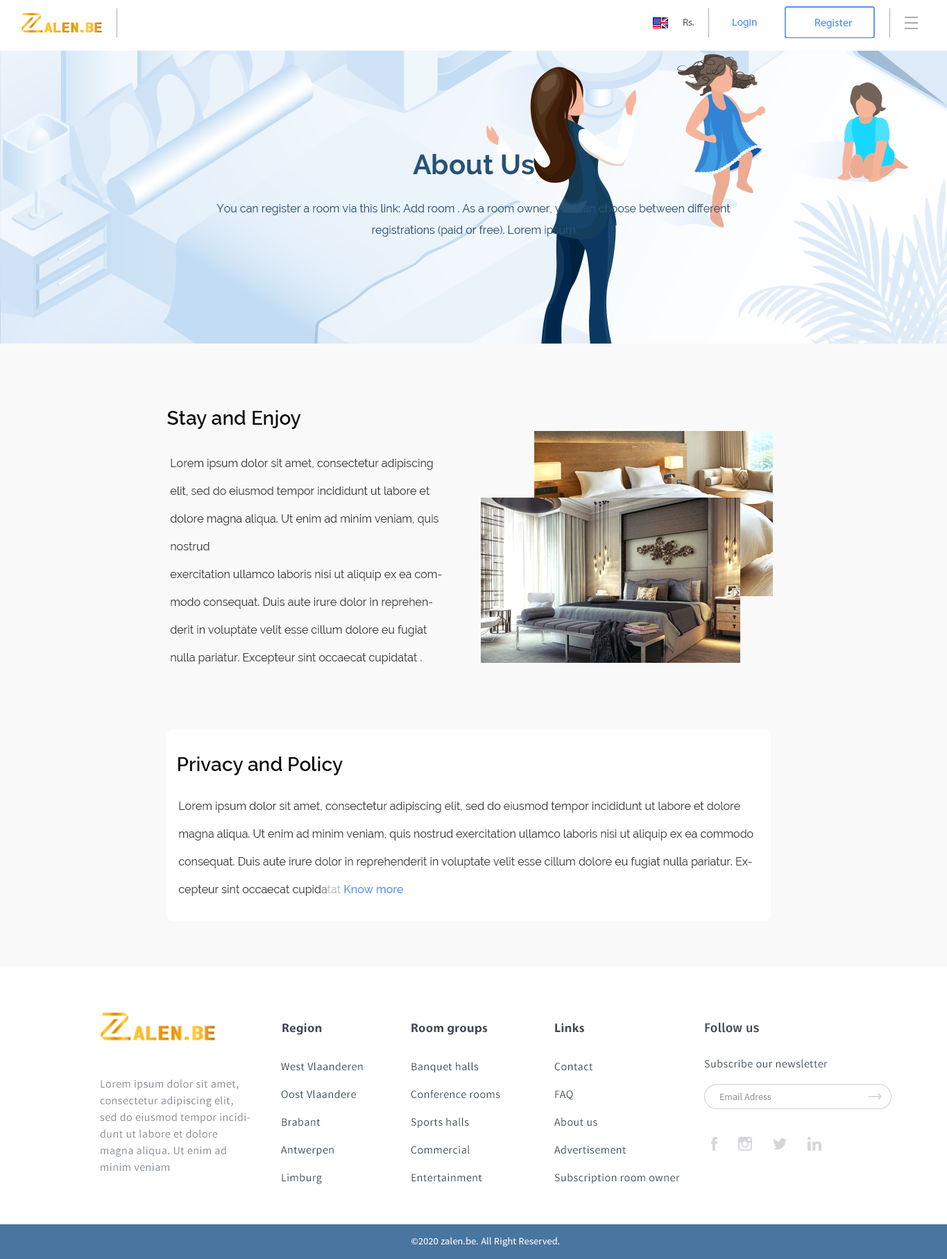
<style>
.page{position:relative;width:947px;height:1259px;background:#ffffff}
.page>*{position:absolute;margin:0}
.t1{font:9.8px "MyriadPro-Regular";color:#636363;scale:1.04 1}
.t2{font:10.2px "MyriadPro-Regular";color:#5392f9;scale:1.07 1}
.t3{font:11.1px "MyriadPro-Regular";color:#5392f9}
.t4{font:27.8px "Raleway-Bold";color:#285277}
.t5{font:11.1px/21.5px "Raleway-Regular";color:#285277}
.t6{font:19.4px "Raleway-SemiBold";color:#0a0a0a}
.t7{font:11.1px/27.8px "Raleway-Regular";color:#3c3c3c}
.t8{font:11.1px/27.8px "Raleway-Regular";color:#7a7a7a}
.t9{font:11.1px/27.8px "Raleway-Regular";color:#bfbfbf}
.t10{font:11.1px/27.8px "Raleway-Medium";color:#5392f9}
.t11{font:12.5px "MyriadPro-Bold";letter-spacing:0.02em;color:#424955}
.t12{font:12.5px "FiraSans-Medium";letter-spacing:0.02em;color:#424955}
.t13{font:11.1px/27.8px "SourceSansPro-Regular";letter-spacing:0.03em;color:#2e4453}
.t14{font:11.1px "SourceSansPro-Regular";letter-spacing:0.03em;color:#2e4453}
.t15{font:11.1px/16.7px "SourceSansPro-Regular";letter-spacing:0.03em;color:#818791}
.t16{font:9.7px "SourceSansPro-Regular";color:#8c8c8c}
.t17{font:9.7px "SourceSansPro-Regular";letter-spacing:0.02em;color:#ffffff}
</style>
<div class="page">
<p class="t1" style="left:684px;top:19px;width:10px;height:7px">Rs.</p>
<p class="t2" style="left:733px;top:19px;width:24px;height:9px">Login</p>
<p class="t3" style="left:815px;top:19px;width:37px;height:9px">Register</p>
<p class="t4" style="left:413px;top:153px;width:121px;height:22px">About Us</p>
<p class="t5" style="left:217px;top:204px;width:514px;height:33px;text-align:center">You can register a room via this link: Add room . As a room owner, you can choose between different registrations (paid or free). Lorem ipsum</p>
<p class="t6" style="left:167px;top:410px;width:134px;height:19px">Stay and Enjoy</p>
<p class="t7" style="left:170px;top:459px;width:272px;height:205px">Lorem ipsum dolor sit amet, consectetur adipiscing elit, sed do eiusmod tempor incididunt ut labore et dolore magna aliqua. Ut enim ad minim veniam, quis nostrud <br>exercitation ullamco laboris nisi ut aliquip ex ea commodo consequat. Duis aute irure dolor in reprehenderit in voluptate velit esse cillum dolore eu fugiat nulla pariatur. Excepteur sint occaecat cupidatat .</p>
<p class="t6" style="left:178px;top:756px;width:165px;height:19px">Privacy and Policy</p>
<p class="t7" style="left:178px;top:802px;width:576px;height:94px">Lorem ipsum dolor sit amet, consectetur adipiscing elit, sed do eiusmod tempor incididunt ut labore et dolore magna aliqua. Ut enim ad minim veniam, quis nostrud exercitation ullamco laboris nisi ut aliquip ex ea commodo consequat. Duis aute irure dolor in reprehenderit in voluptate velit esse cillum dolore eu fugiat nulla pariatur. Excepteur sint occaecat cupid<span class="t8">a</span><span class="t9">tat </span><span class="t10">Know more</span></p>
<p class="t11" style="left:282px;top:1023px;width:40px;height:12px">Region</p>
<p class="t11" style="left:412px;top:1023px;width:76px;height:12px">Room groups</p>
<p class="t11" style="left:555px;top:1023px;width:29px;height:10px">Links</p>
<p class="t12" style="left:705px;top:1022px;width:54px;height:11px">Follow us</p>
<p class="t13" style="left:281px;top:1062px;width:82px;height:122px">West Vlaanderen<br>Oost Vlaandere<br>Brabant<br>Antwerpen<br>Limburg</p>
<p class="t13" style="left:411px;top:1062px;width:89px;height:120px">Banquet halls<br>Conference rooms<br>Sports halls<br>Commercial<br>Entertainment</p>
<p class="t14" style="left:704px;top:1059px;width:124px;height:9px">Subscribe our newsletter</p>
<p class="t13" style="left:554px;top:1062px;width:126px;height:122px">Contact<br>FAQ<br>About us<br>Advertisement<br>Subscription room owner</p>
<p class="t15" style="left:100px;top:1079px;width:150px;height:92px">Lorem ipsum dolor sit amet, consectetur adipiscing elit, sed do eiusmod tempor incididunt ut labore et dolore magna aliqua. Ut enim ad minim veniam</p>
<p class="t16" style="left:720px;top:1092px;width:52px;height:8px">Email Adress</p>
<p class="t17" style="left:412px;top:1237px;width:148px;height:9px">©2020 zalen.be. All Right Reserved.</p>
</div>
